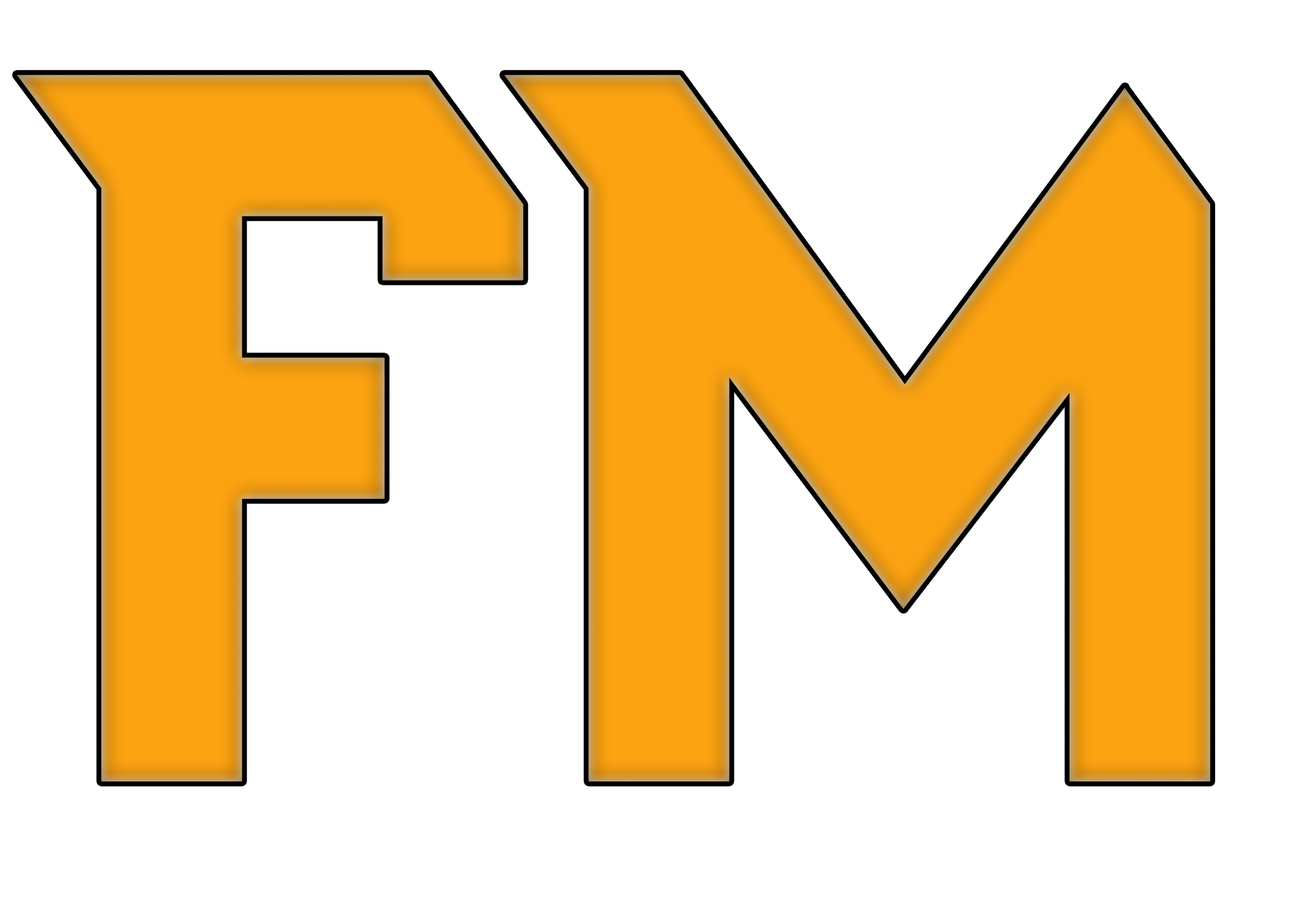
<style>
.page{position:relative;width:1292px;height:923px;background:#ffffff}
.page>*{position:absolute;margin:0}
.t1{font:1010.2px "BigSpace";color:#fca311}
</style>
<div class="page">
<p class="t1" style="left:17px;top:74px;width:1194px;height:707px">FM</p>
</div>
